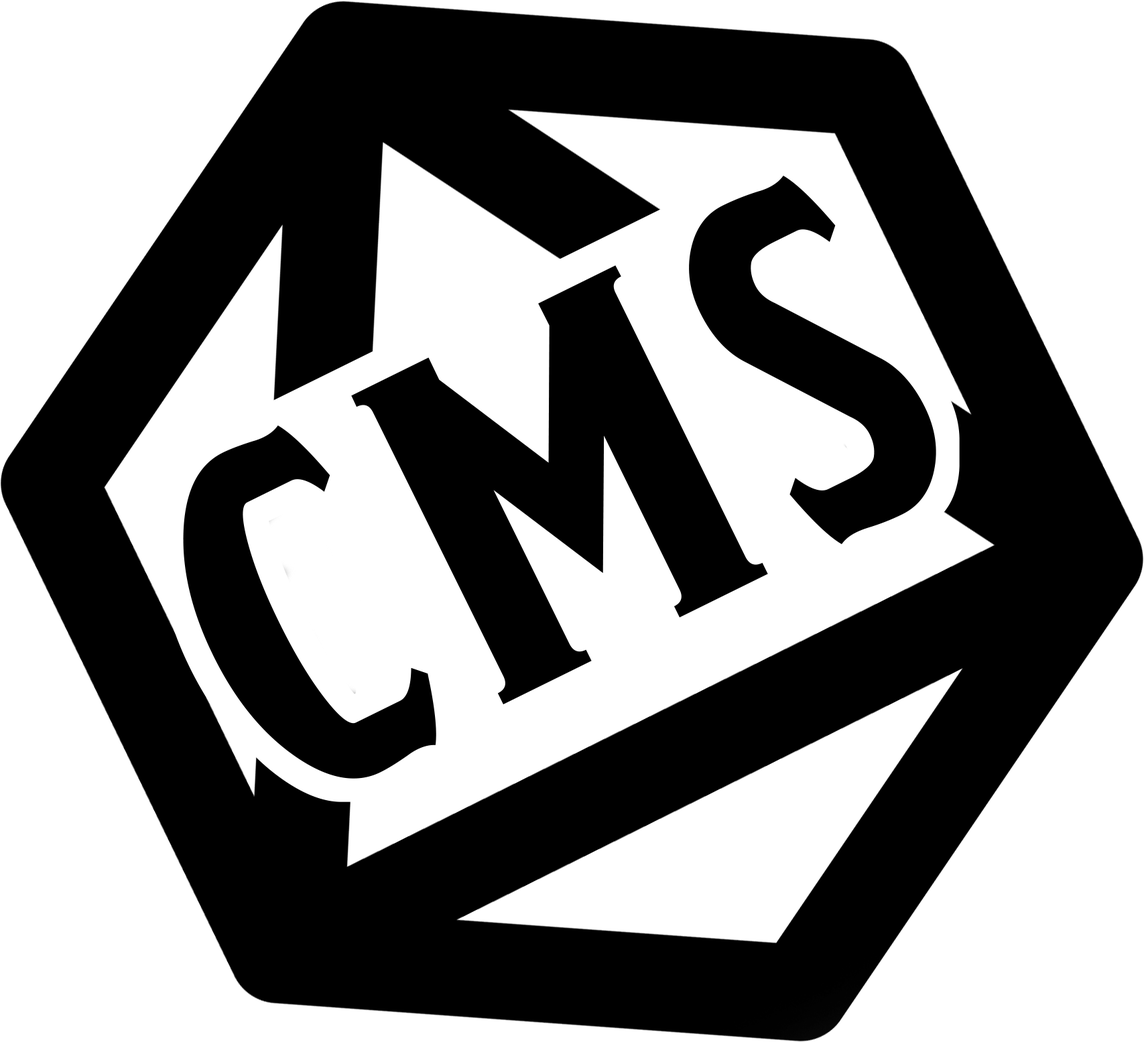
<style>
.page{position:relative;width:1144px;height:1042px;background:#ffffff}
.page>*{position:absolute;margin:0}
.t1{font:503.3px "Draconis";letter-spacing:0.06em;color:#000000}
</style>
<div class="page">
<p class="t1" style="left:183px;top:176px;width:753px;height:603px;rotate:-26deg">CMS</p>
</div>
